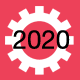
<style>
.page{position:relative;width:80px;height:80px;background:#ed4159}
.page>*{position:absolute;margin:0}
.t1{font:25.8px "HelveticaNeue";color:#000000}
</style>
<div class="page">
<p class="t1" style="left:13px;top:30px;width:57px;height:19px">2020</p>
</div>
